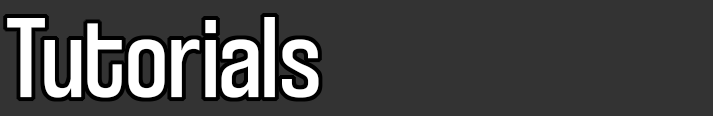
<style>
.page{position:relative;width:713px;height:116px;background:#333333}
.page>*{position:absolute;margin:0}
.t1{font:120px "CoolveticaCondensedRg-Regular";color:#ffffff}
</style>
<div class="page">
<p class="t1" style="left:7px;top:17px;width:312px;height:81px">Tutorials</p>
</div>
